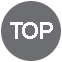
<style>
.page{position:relative;width:62px;height:62px;background:#6d6e71}
.page>*{position:absolute;margin:0}
.t1{font:24px "Arial-BoldMT";letter-spacing:-0.075em;color:#ffffff}
</style>
<div class="page">
<p class="t1" style="left:10px;top:22px;width:43px;height:17px">TOP</p>
</div>
